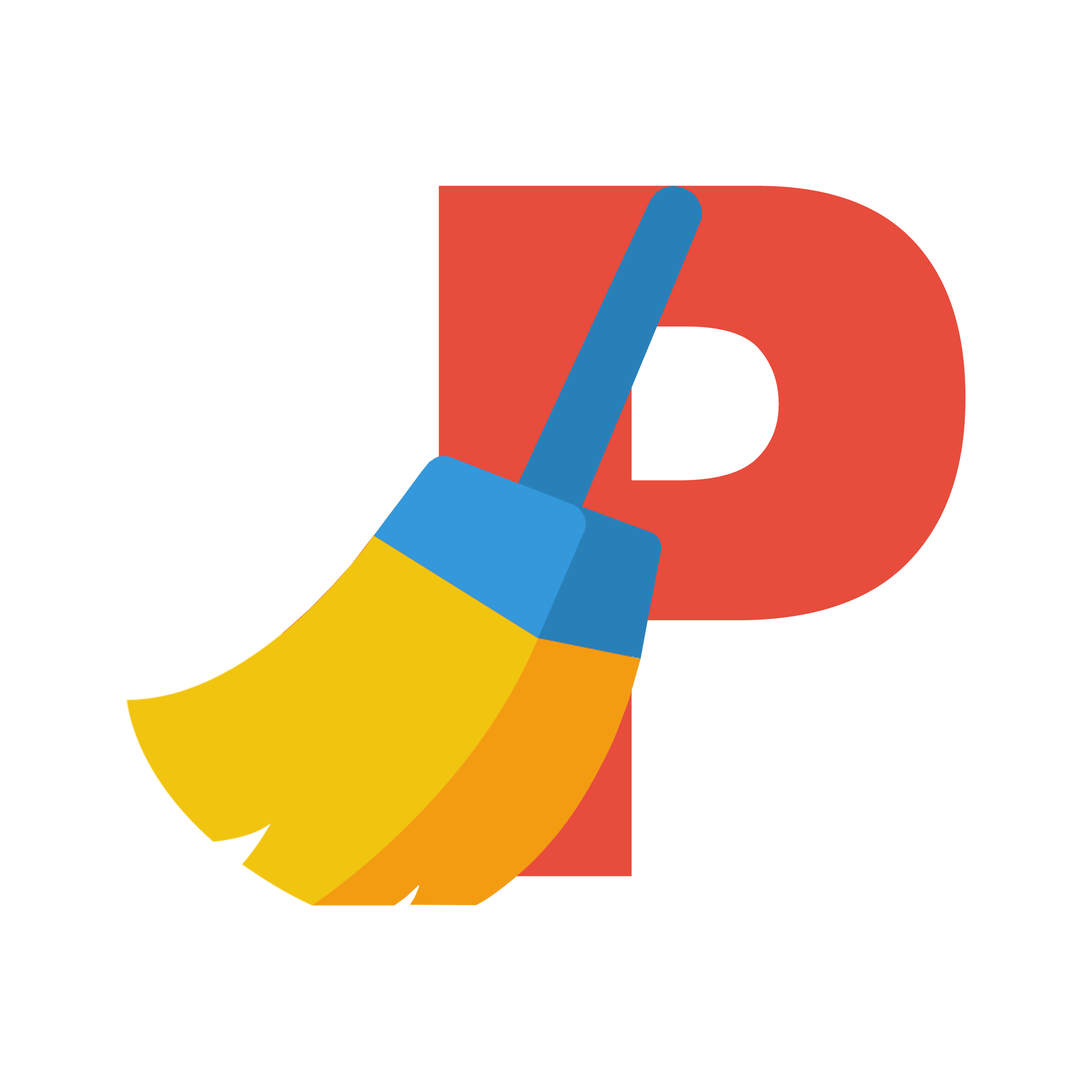
<style>
.page{position:relative;width:1092px;height:1092px;background:#ffffff}
.page>*{position:absolute;margin:0}
.t1{font:963.9px "Arial-Black";letter-spacing:0.1em;text-transform:uppercase;scale:0.9 1}
</style>
<div class="page">
<p class="t1" style="left:438px;top:186px;width:528px;height:690px">P</p>
</div>
